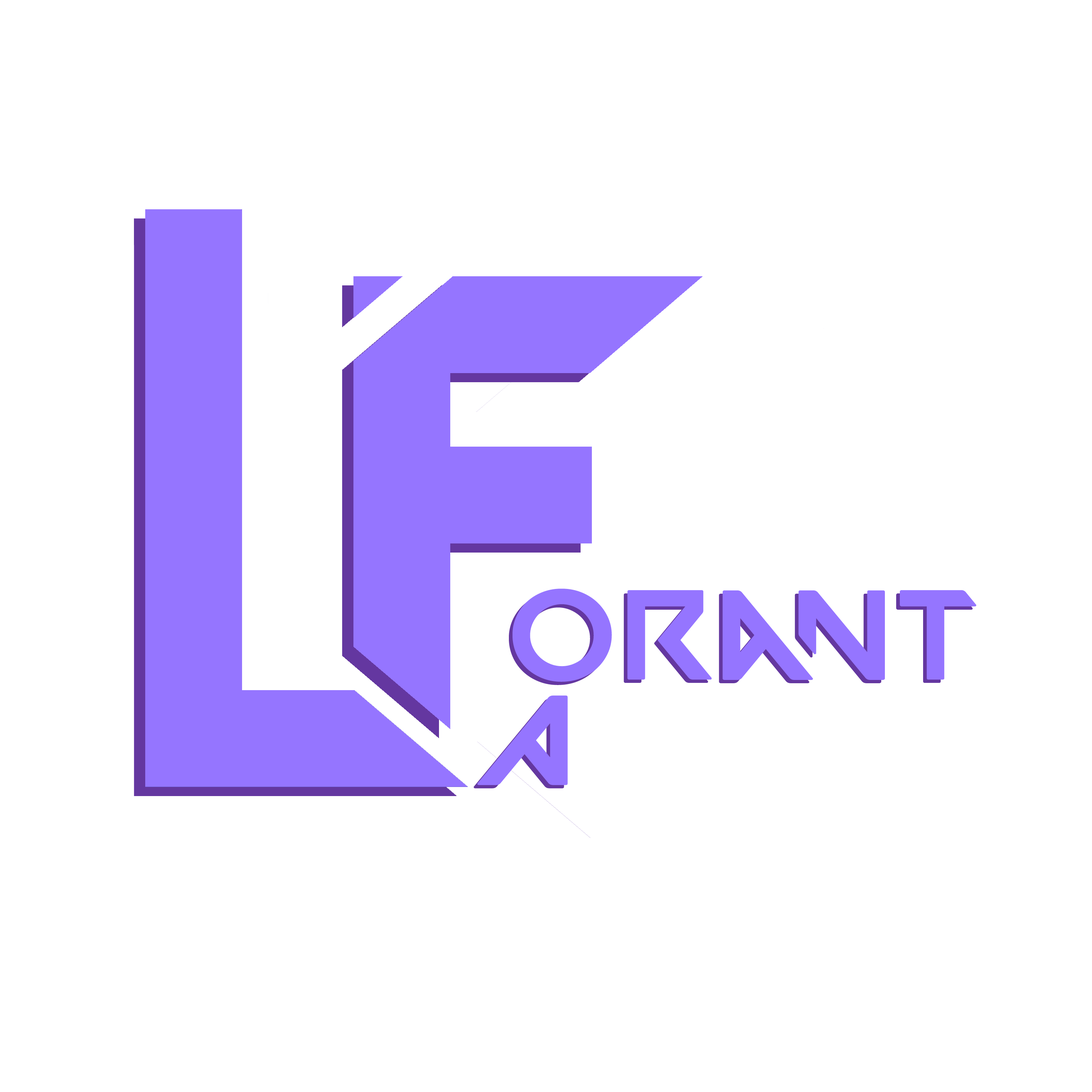
<style>
.page{position:relative;width:1092px;height:1092px;background:#ffffff}
.page>*{position:absolute;margin:0}
.t1{font:127.7px "VALORANT-Regular";color:#9575ff;scale:1.08 1}
</style>
<div class="page">
<p class="t1" style="left:513px;top:589px;width:463px;height:93px">orantan</p>
<p class="t1" style="left:477px;top:695px;width:91px;height:90px">A</p>
</div>
